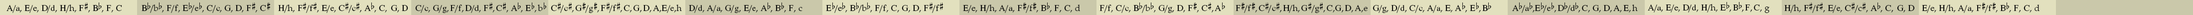
<style>
.page{position:relative;width:2193px;height:15px;background:#cac8aa}
.page>*{position:absolute;margin:0}
.t1{font:9px "OpusChords";color:#0e0e0d}
.t2{font:9px "Palatino-Roman";color:#0e0e0d}
</style>
<div class="page">
<p class="t1" style="left:6px;top:2px;width:116px;height:11px">A/a<span class="t2">,</span>  E/e<span class="t2">,</span>  D/d<span class="t2">,</span>  H/<span class="t2">h,</span>  F#<span class="t2">,</span>  Bb<span class="t2">,</span>  F<span class="t2">,</span>  C</p>
<p class="t1" style="left:142px;top:2px;width:128px;height:11px">Bb/<span class="t2">b</span>b<span class="t2">,</span>  F/f<span class="t2">,</span>  Eb/eb<span class="t2">,</span>  C/c<span class="t2">,</span>  G<span class="t2">,</span>  D<span class="t2">,</span>  F#<span class="t2">,</span>  C#</p>
<p class="t1" style="left:278px;top:2px;width:130px;height:11px">H/<span class="t2">h,</span>  F#/f#<span class="t2">,</span>  E/e<span class="t2">,</span>  C#/c#<span class="t2">,</span>  Ab<span class="t2">,</span>  C<span class="t2">, </span> G<span class="t2">,</span>  D</p>
<p class="t1" style="left:415px;top:2px;width:131px;height:11px">C/c<span class="t2">,</span>  G/g<span class="t2">,</span> F/f<span class="t2">,</span> D/d<span class="t2">,</span>  F#<span class="t2">,</span> C#<span class="t2">,</span>  Ab<span class="t2">, </span>Eb<span class="t2">, b</span>b</p>
<p class="t1" style="left:551px;top:2px;width:131px;height:11px">C#/c#<span class="t2">,</span> G#/g#<span class="t2">,</span> F#/f#<span class="t2">,</span> C<span class="t2">,</span> G<span class="t2">,</span> D<span class="t2">,</span> A<span class="t2">,</span>E/e<span class="t2">,h</span></p>
<p class="t2" style="left:689px;top:2px;width:114px;height:11px"><span class="t1">D/d</span>,<span class="t1">  A/a</span>,<span class="t1">  G/g</span>,<span class="t1">  E/e</span>,<span class="t1">  Ab</span>,<span class="t1">  Bb</span>,<span class="t1">  F</span>,  c</p>
<p class="t1" style="left:826px;top:2px;width:117px;height:11px">Eb/eb<span class="t2">,</span>  Bb/<span class="t2">b</span>b<span class="t2">,</span>  F/f<span class="t2">,</span>  C<span class="t2">,</span>  G<span class="t2">,</span>  D<span class="t2">,</span>  F#/f#</p>
<p class="t1" style="left:963px;top:2px;width:117px;height:11px">E/e<span class="t2">,</span>  H/<span class="t2">h,</span>  A/a<span class="t2">,</span>  F#/<span class="t2">f</span>#<span class="t2">,</span>  Bb<span class="t2">,</span>  F<span class="t2">,</span>  C<span class="t2">, d</span></p>
<p class="t1" style="left:1100px;top:2px;width:125px;height:11px">F/f<span class="t2">,</span>  C/c<span class="t2">,</span>  Bb/<span class="t2">b</span>b<span class="t2">,</span>  G/g<span class="t2">,</span>  D<span class="t2">,</span>  F#<span class="t2">,</span>  C#<span class="t2">,</span> Ab</p>
<p class="t1" style="left:1236px;top:2px;width:132px;height:11px">F#/f#<span class="t2">,</span> C#/c#<span class="t2">,</span> H/<span class="t2">h,</span> G#/g#<span class="t2">,</span> C<span class="t2">,</span>G<span class="t2">,</span> D<span class="t2">,</span> A<span class="t2">,e</span></p>
<p class="t1" style="left:1373px;top:2px;width:118px;height:11px">G/g<span class="t2">,</span>  D/d<span class="t2">,</span>  C/c<span class="t2">,</span>  A/a<span class="t2">,</span>  E<span class="t2">,</span>  Ab<span class="t2">,</span>  Eb<span class="t2">,</span> Bb</p>
<p class="t1" style="left:1512px;top:2px;width:126px;height:11px">Ab/ab<span class="t2">,</span>Eb/eb<span class="t2">,</span> Db/db<span class="t2">,</span> C<span class="t2">,</span>  G<span class="t2">,</span>  D<span class="t2">,</span> A<span class="t2">,</span> E<span class="t2">, h</span></p>
<p class="t1" style="left:1648px;top:2px;width:122px;height:11px">A/a<span class="t2">,</span>  E/e<span class="t2">,</span>  D/d<span class="t2">,</span>  H/<span class="t2">h,</span>  Eb<span class="t2">,</span> Bb<span class="t2">,</span> F<span class="t2">,</span> C<span class="t2">, g</span></p>
<p class="t1" style="left:1784px;top:2px;width:131px;height:11px">H/<span class="t2">h,</span>  F#/f#<span class="t2">,</span>  E/e<span class="t2">,</span>  C#/<span class="t2">c</span>#<span class="t2">,</span>  Ab<span class="t2">,</span>  C<span class="t2">, </span> G<span class="t2">,</span>  D</p>
<p class="t1" style="left:1922px;top:2px;width:118px;height:11px">E/e<span class="t2">,</span>  H/<span class="t2">h,</span>  A/a<span class="t2">,</span>  F#/f#<span class="t2">,</span>  Bb<span class="t2">,</span>  F<span class="t2">,</span>  C<span class="t2">, d</span></p>
</div>
